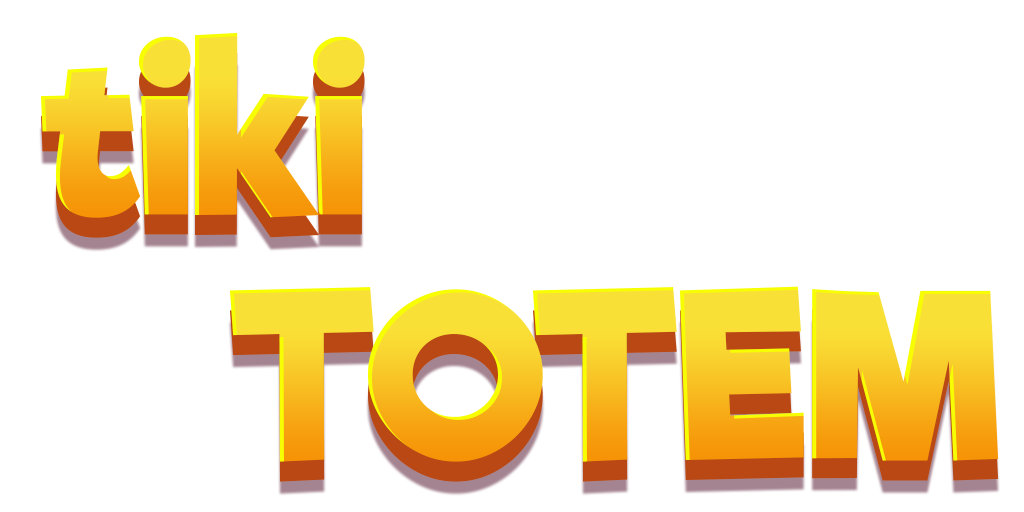
<style>
.page{position:relative;width:1024px;height:512px;background:#ffffff}
.page>*{position:absolute;margin:0}
.t1{font:223.1px "RifficFree-Bold"}
</style>
<div class="page">
<p class="t1" style="left:41px;top:32px;width:324px;height:186px">tiki</p>
<p class="t1" style="left:41px;top:52px;width:324px;height:186px">tiki</p>
<p class="t1" style="left:230px;top:286px;width:769px;height:176px">TOTEM</p>
<p class="t1" style="left:230px;top:306px;width:769px;height:176px">TOTEM</p>
</div>
